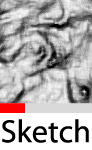
<style>
.page{position:relative;width:92px;height:150px}
.page>*{position:absolute;margin:0}
.t1{font:32.3px "MyriadPro-Regular";color:#000000}
</style>
<div class="page">
<p class="t1" style="left:2px;top:119px;width:87px;height:24px">Sketch</p>
</div>
